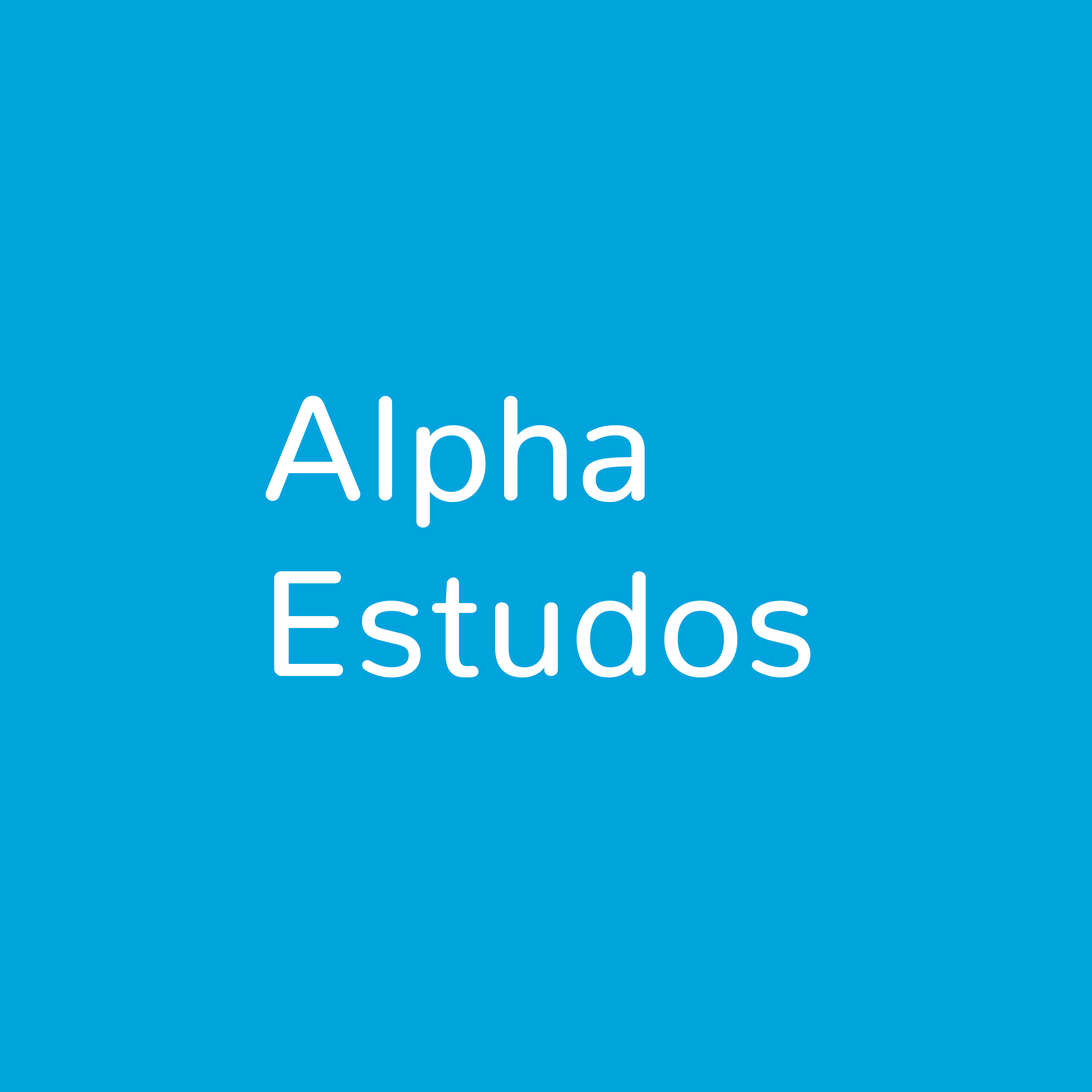
<style>
.page{position:relative;width:1092px;height:1092px;background:#00a4dd}
.page>*{position:absolute;margin:0}
.t1{font:146.3px "Nunito-Light";color:#ffffff;font-weight:bold}
</style>
<div class="page">
<p class="t1" style="left:266px;top:396px;width:544px;height:282px">Alpha<br>Estudos</p>
</div>
